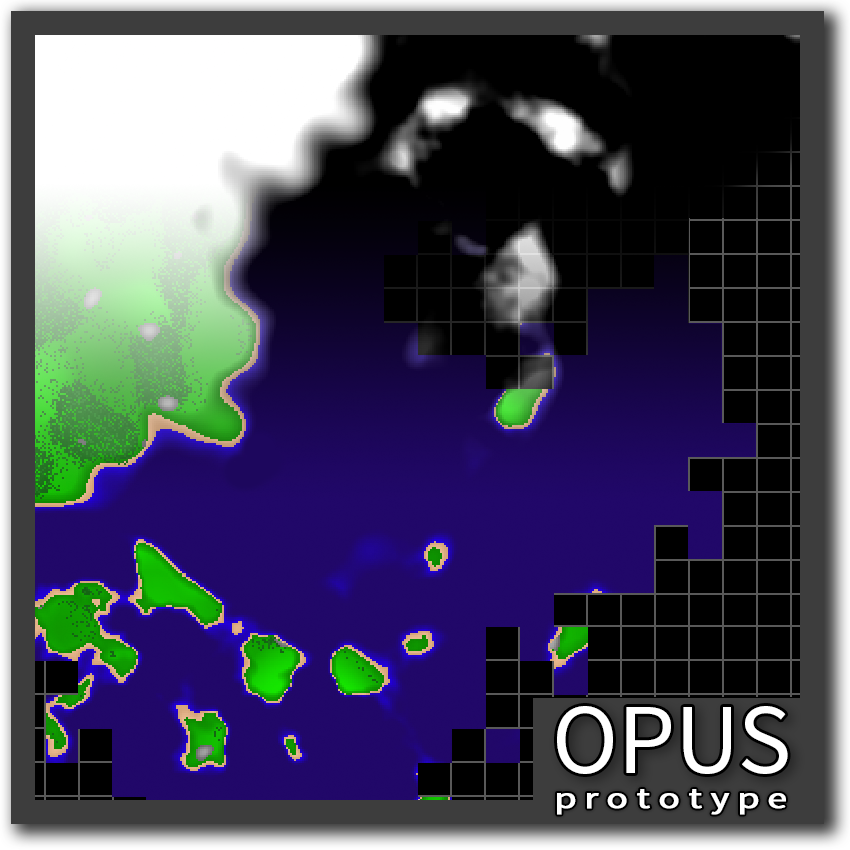
<style>
.page{position:relative;width:850px;height:850px}
.page>*{position:absolute;margin:0}
.t1{font:100px "SourceSansPro-Regular";color:#ffffff}
.t2{font:30px "SourceSansPro-Regular";letter-spacing:0.2em;color:#ffffff;font-weight:bold;scale:1.3 1}
</style>
<div class="page">
<p class="t1" style="left:557px;top:706px;width:231px;height:68px">OPUS</p>
<p class="t2" style="left:557px;top:789px;width:229px;height:26px">prototype</p>
</div>
